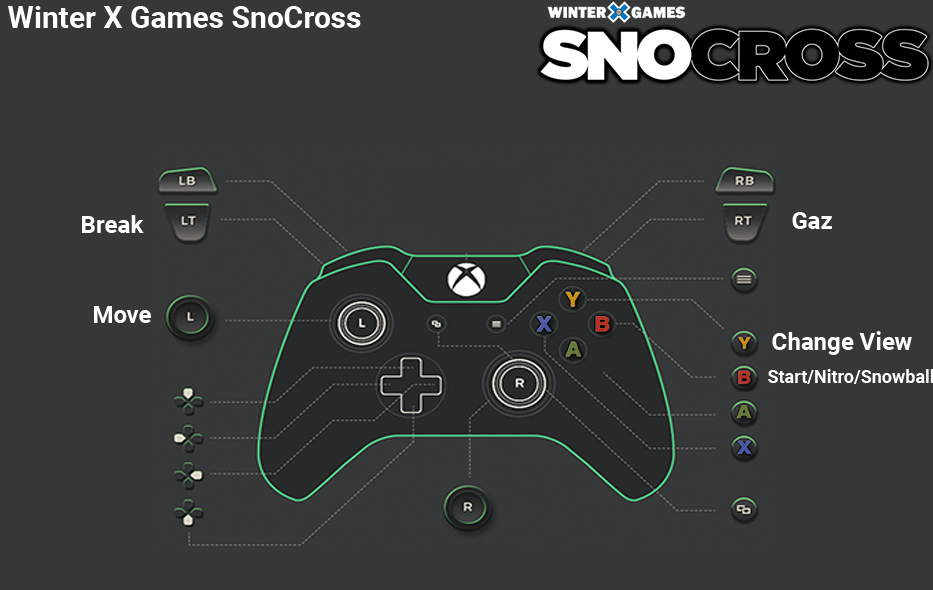
<style>
.page{position:relative;width:933px;height:590px;background:#363838}
.page>*{position:absolute;margin:0}
.t1{font:30px "Roboto-Bold";color:#ffffff}
.t2{font:24px "Roboto-Bold";color:#ffffff}
.t3{font:18px "Roboto-Bold";color:#ffffff}
</style>
<div class="page">
<p class="t1" style="left:8px;top:6px;width:353px;height:22px">Winter X Games SnoCross</p>
<p class="t2" style="left:82px;top:215px;width:62px;height:18px">Break</p>
<p class="t2" style="left:792px;top:212px;width:40px;height:17px">Gaz</p>
<p class="t2" style="left:94px;top:306px;width:57px;height:17px">Move</p>
<p class="t2" style="left:772px;top:331px;width:140px;height:24px">Change View</p>
<p class="t3" style="left:768px;top:369px;width:166px;height:15px">Start/Nitro/Snowball</p>
</div>
